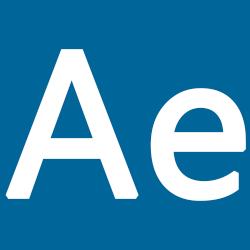
<style>
.page{position:relative;width:250px;height:250px;background:#006699}
.page>*{position:absolute;margin:0}
.t1{font:205px "Ebrima";color:#ffffff;font-weight:bold}
</style>
<div class="page">
<p class="t1" style="left:5px;top:49px;width:241px;height:152px">Ae</p>
</div>
